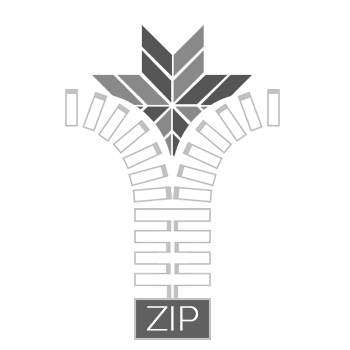
<style>
.page{position:relative;width:350px;height:350px;background:#ffffff}
.page>*{position:absolute;margin:0}
.t1{font:33.1px "Raleway-ExtraLight";color:#ffffff;text-transform:uppercase;font-weight:bold}
</style>
<div class="page">
<p class="t1" style="left:147px;top:306px;width:51px;height:25px">zip</p>
</div>
